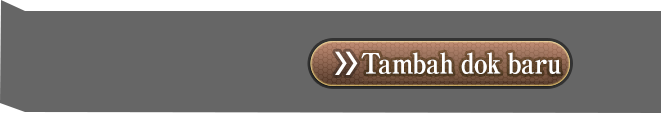
<style>
.page{position:relative;width:661px;height:113px;background:#666666}
.page>*{position:absolute;margin:0}
.t1{font:28px "RyuminPro-ExBold";letter-spacing:-0.04em;color:#ffffff;scale:0.9 1}
</style>
<div class="page">
<p class="t1" style="left:361px;top:52px;width:200px;height:22px">Tambah dok baru</p>
</div>
